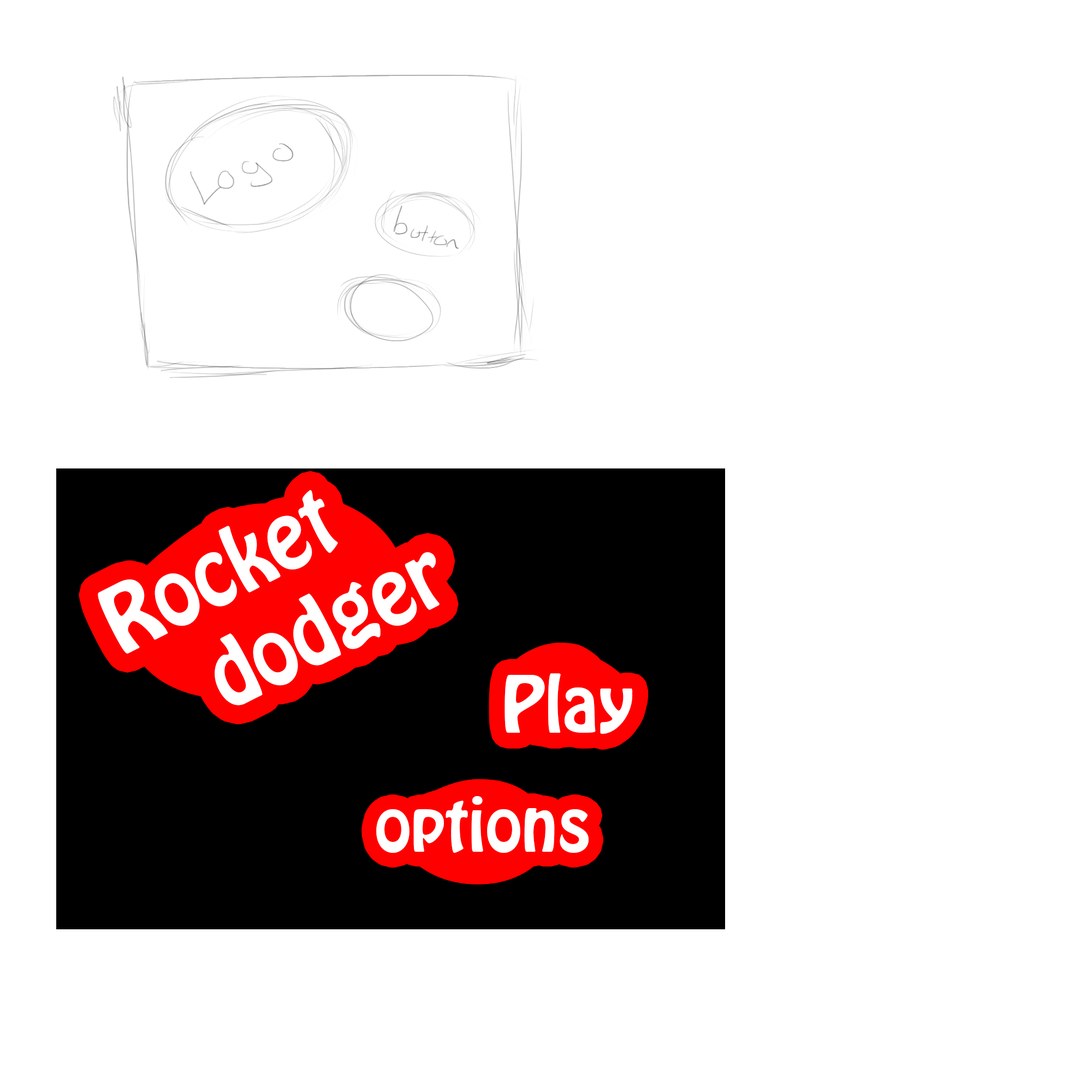
<style>
.page{position:relative;width:1092px;height:1092px;background:#ffffff}
.page>*{position:absolute;margin:0}
.t1{font:81.1px "HoboStd";color:#ffffff}
.t2{font:69.5px "HoboStd";color:#ffffff}
.t3{font:65.2px "HoboStd";color:#ffffff}
</style>
<div class="page">
<p class="t1" style="left:98px;top:490px;width:342px;height:215px;rotate:-27deg">Rocket <br>   dodger</p>
<p class="t2" style="left:504px;top:673px;width:129px;height:61px">Play</p>
<p class="t3" style="left:376px;top:796px;width:213px;height:57px">options</p>
</div>
